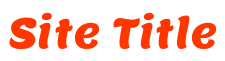
<style>
.page{position:relative;width:225px;height:61px;background:#ffffff}
.page>*{position:absolute;margin:0}
.t1{font:42px "Lemon-Regular";color:#ff3600}
</style>
<div class="page">
<p class="t1" style="left:9px;top:12px;width:208px;height:37px">Site Title</p>
</div>
